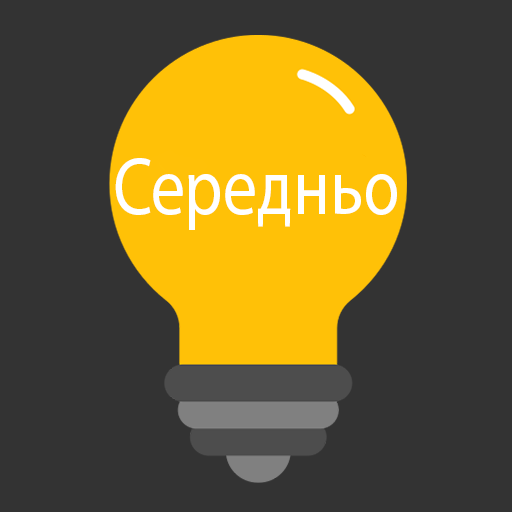
<style>
.page{position:relative;width:512px;height:512px;background:#333333}
.page>*{position:absolute;margin:0}
.t1{font:81.1px "MyriadPro-Regular";color:#ffffff;scale:0.83 1}
</style>
<div class="page">
<p class="t1" style="left:115px;top:158px;width:282px;height:72px">Середньо</p>
</div>
